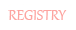
<style>
.page{position:relative;width:76px;height:30px;background:#ffffff}
.page>*{position:absolute;margin:0}
.t1{font:18px "Gabriola";color:#fda5a1}
</style>
<div class="page">
<p class="t1" style="left:8px;top:10px;width:59px;height:10px">REGISTRY</p>
</div>
